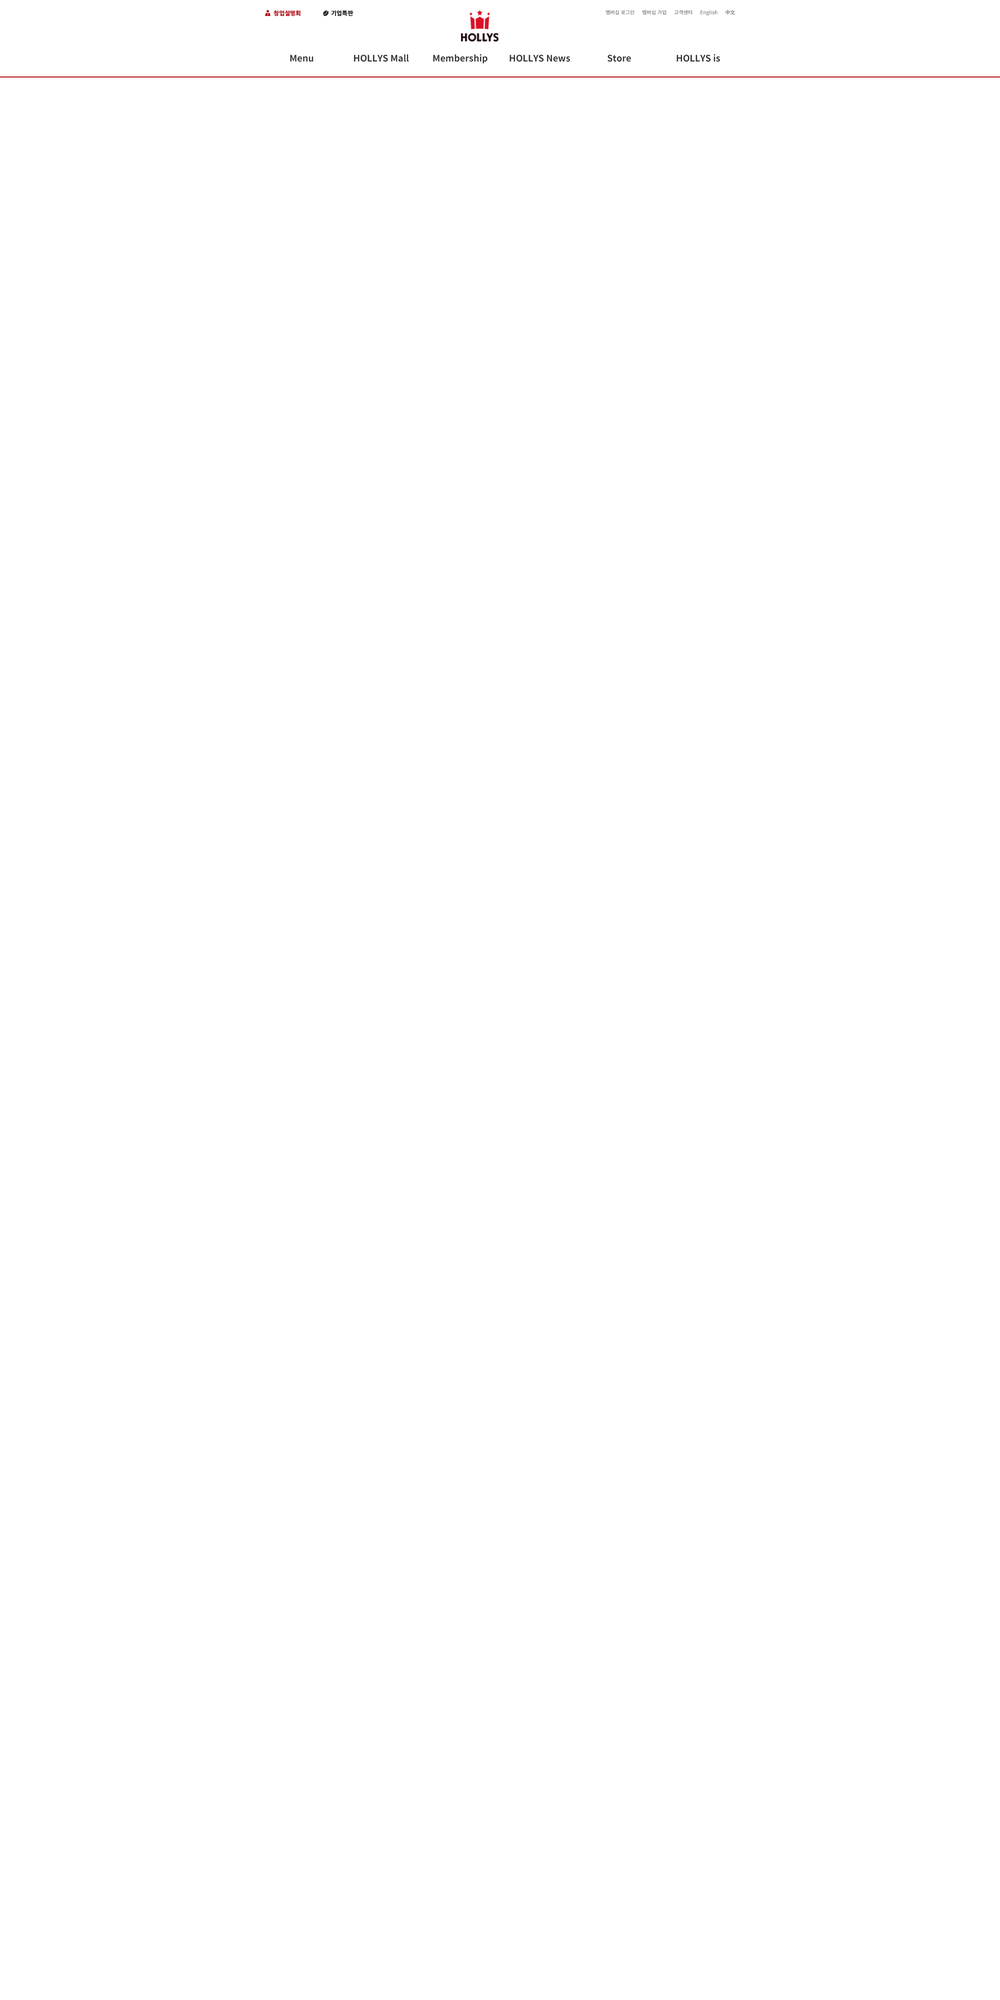
<style>
.page{position:relative;width:1000px;height:2000px;background:#ffffff}
.page>*{position:absolute;margin:0}
.t1{font:5px "NotoSansKR-Medium";color:#666666}
.t2{font:9px "NotoSansKR-Bold";color:#333333}
</style>
<div class="page">
<p class="t1" style="left:606px;top:10px;width:28px;height:5px">멤버십 로그인</p>
<p class="t1" style="left:642px;top:10px;width:24px;height:5px">멤버십 가입</p>
<p class="t1" style="left:674px;top:10px;width:18px;height:5px">고객센터</p>
<p class="t1" style="left:700px;top:10px;width:18px;height:6px">English</p>
<p class="t1" style="left:726px;top:10px;width:9px;height:5px">中文</p>
<p class="t2" style="left:354px;top:54px;width:55px;height:8px">HOLLYS Mall</p>
<p class="t2" style="left:433px;top:54px;width:55px;height:10px">Membership</p>
<p class="t2" style="left:676px;top:54px;width:44px;height:8px">HOLLYS is</p>
<p class="t2" style="left:290px;top:54px;width:24px;height:8px">Menu</p>
<p class="t2" style="left:510px;top:54px;width:60px;height:8px">HOLLYS News</p>
<p class="t2" style="left:608px;top:54px;width:23px;height:8px">Store</p>
</div>
